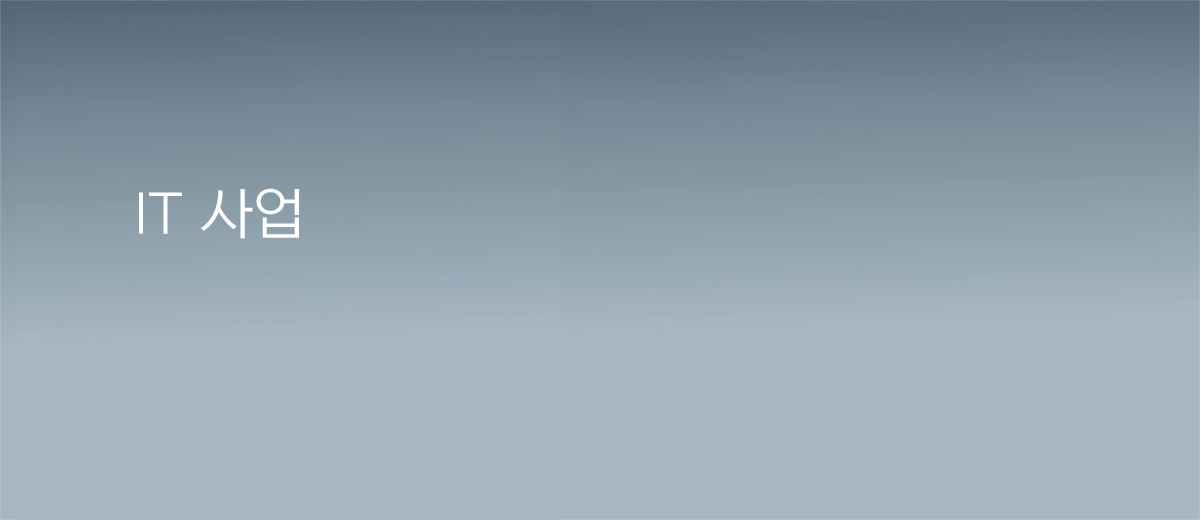
<style>
.page{position:relative;width:1200px;height:520px;background:#a6b6c3}
.page>*{position:absolute;margin:0}
.t1{font:55px "NEXONLv1GothicLowOTFRegular";color:#ffffff}
</style>
<div class="page">
<p class="t1" style="left:139px;top:188px;width:160px;height:51px">IT 사업</p>
</div>
